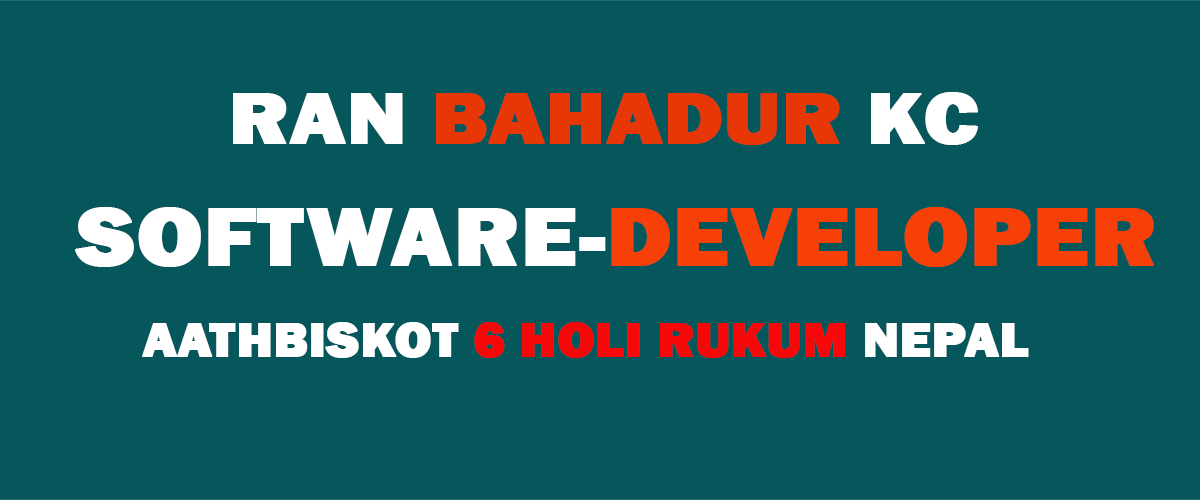
<style>
.page{position:relative;width:1200px;height:500px;background:#06575b}
.page>*{position:absolute;margin:0}
.t1{font:75.4px "FranklinGothic-Heavy";color:#e83707;text-transform:uppercase;font-weight:bold;scale:1.14 1}
.t2{font:75.4px "FranklinGothic-Heavy";color:#ffffff;text-transform:uppercase;font-weight:bold;scale:1.14 1}
.t3{font:85.5px "FranklinGothic-Heavy";color:#ffffff;text-transform:uppercase;font-weight:bold;scale:1.1 1}
.t4{font:85.5px "FranklinGothic-Heavy";color:#f74008;text-transform:uppercase;font-weight:bold;scale:1.1 1}
.t5{font:50px "FranklinGothic-Heavy";color:#f60808;text-transform:uppercase;font-weight:bold;scale:1.05 1}
.t6{font:50px "FranklinGothic-Heavy";color:#ffffff;text-transform:uppercase;font-weight:bold;scale:1.05 1}
</style>
<div class="page">
<p class="t1" style="left:233px;top:92px;width:745px;height:53px"><span class="t2">Ran </span>Bahadur<span class="t2"> kc</span></p>
<p class="t3" style="left:75px;top:207px;width:1079px;height:60px">Software-<span class="t4">Developer</span></p>
<p class="t5" style="left:142px;top:322px;width:887px;height:36px"><span class="t6">Aathbiskot </span>6 Holi Rukum<span class="t6"> Nepal</span></p>
</div>
